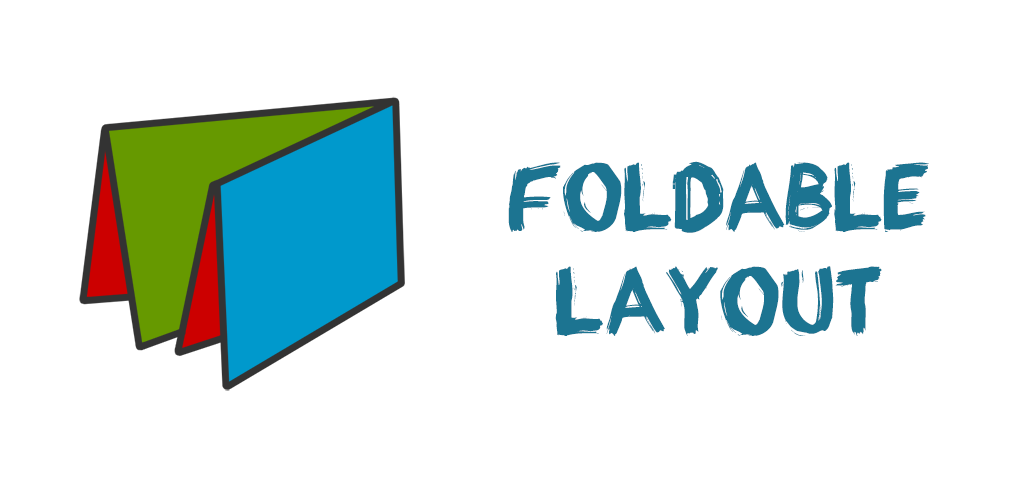
<style>
.page{position:relative;width:1024px;height:500px;background:#ffffff}
.page>*{position:absolute;margin:0}
.t1{font:86.7px "appopaint-Regular";color:#1c7491}
</style>
<div class="page">
<p class="t1" style="left:508px;top:161px;width:421px;height:175px;text-align:center">Foldable<br>Layout</p>
</div>
